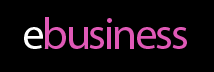
<style>
.page{position:relative;width:214px;height:72px;background:#000000}
.page>*{position:absolute;margin:0}
.t1{font:45px "MyriadPro-Regular";letter-spacing:-0.05em;color:#e059b7}
.t2{font:45px "MyriadPro-Regular";letter-spacing:-0.05em;color:#ffffff}
</style>
<div class="page">
<p class="t1" style="left:24px;top:17px;width:163px;height:32px"><span class="t2">e</span>business</p>
</div>
